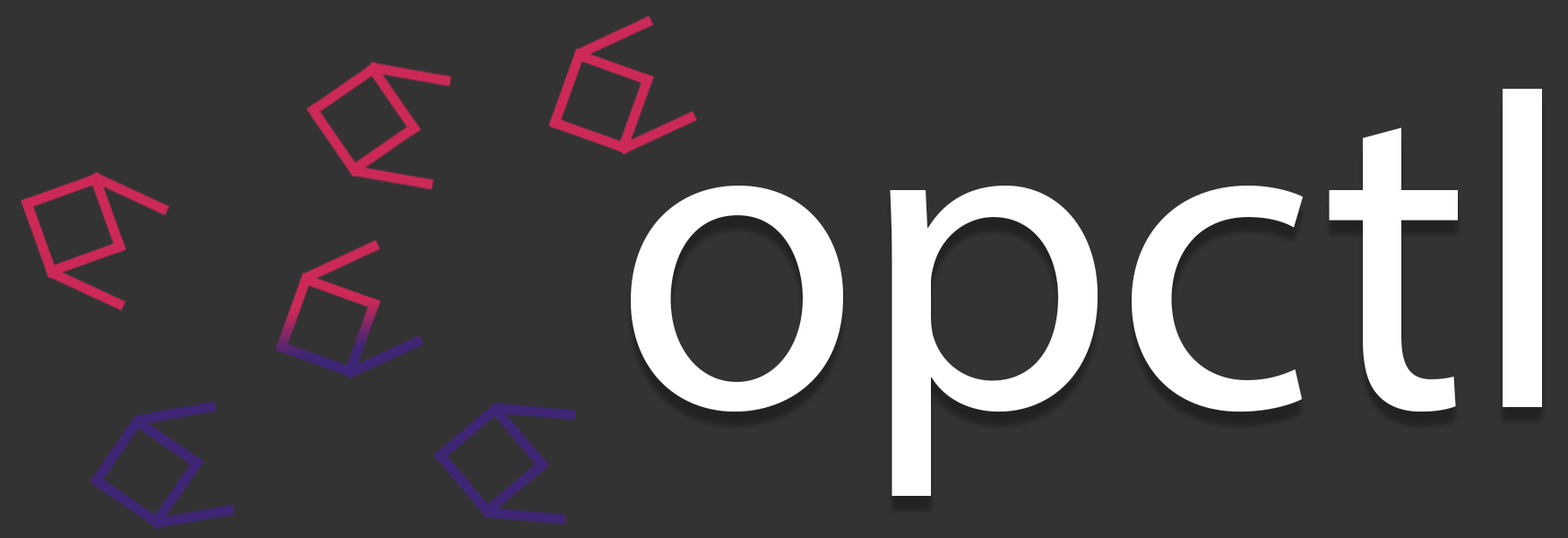
<style>
.page{position:relative;width:1568px;height:538px;background:#333333}
.page>*{position:absolute;margin:0}
.t1{font:448px "MyriadPro-Regular";color:#ffffff}
</style>
<div class="page">
<p class="t1" style="left:631px;top:89px;width:911px;height:406px">opctl</p>
</div>
